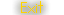
<style>
.page{position:relative;width:64px;height:15px;background:#ffffff}
.page>*{position:absolute;margin:0}
.t1{font:16px "Unexplored";color:#ffd200}
</style>
<div class="page">
<p class="t1" style="left:21px;top:1px;width:22px;height:12px">Exit</p>
<p class="t1" style="left:21px;top:1px;width:22px;height:12px">Exit</p>
</div>
